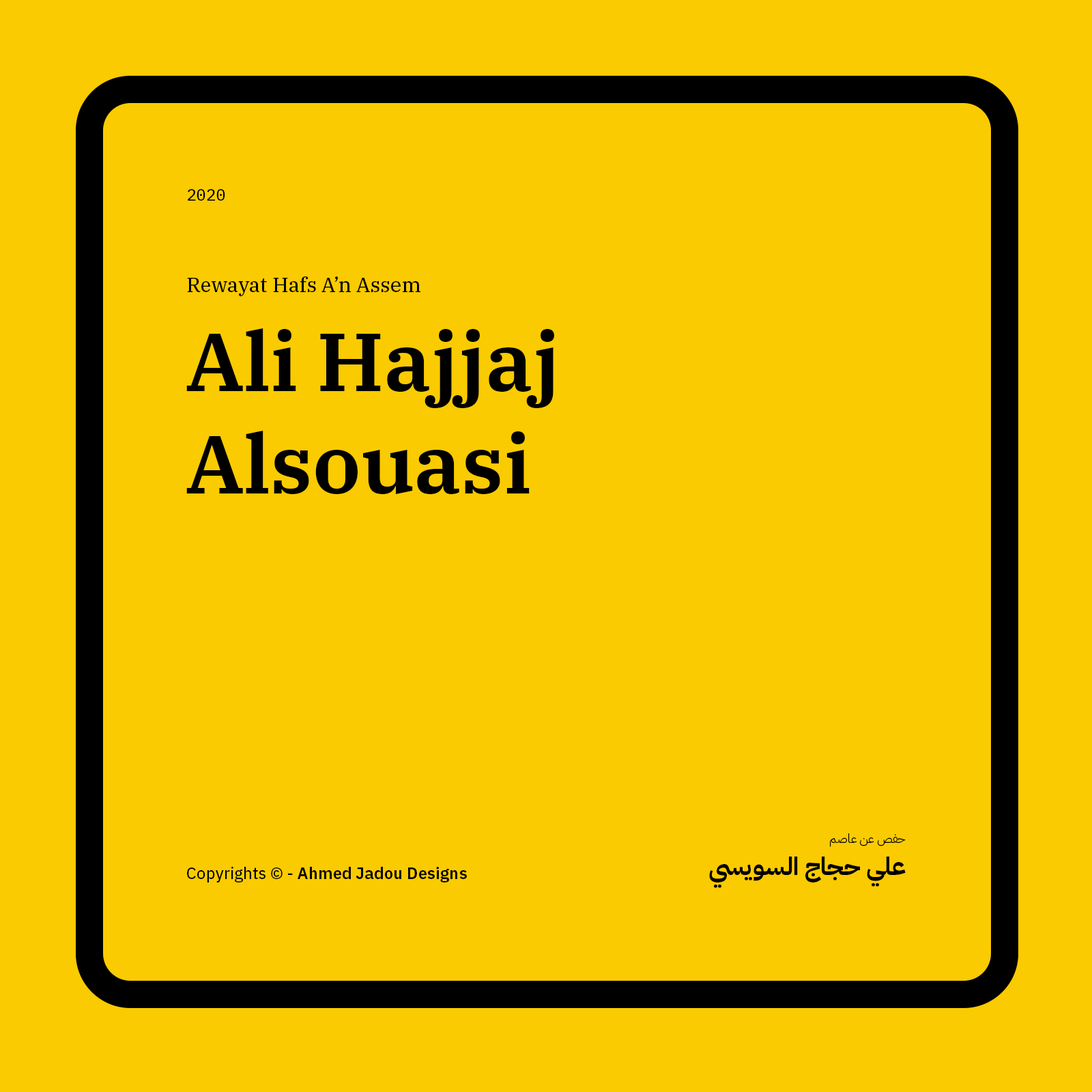
<style>
.page{position:relative;width:1092px;height:1092px;background:#facb00}
.page>*{position:absolute;margin:0}
.t1{font:16.4px "IBMPlexMono-Text";color:#000000}
.t2{font:20.5px "IBMPlexSerif-Text";color:#000000}
.t3{font:81.9px/102.7px "IBMPlexSerif-SemiBold";color:#000000}
.t4{font:12.3px "IBMPlexArabic-Light";color:#000000}
.t5{font:24.6px "IBMPlexArabic-Bold";color:#000000}
.t6{font:16.4px "IBMPlexSans-SemiBold";color:#000000}
.t7{font:16.4px "IBMPlexSans-Text";color:#000000}
</style>
<div class="page">
<p class="t1" style="left:188px;top:189px;width:37px;height:12px">2020</p>
<p class="t2" style="left:187px;top:276px;width:233px;height:20px">Rewayat Hafs A’n Assem</p>
<p class="t3" style="left:186px;top:328px;width:368px;height:166px">Ali Hajjaj Alsouasi</p>
<p class="t4" style="left:830px;top:833px;width:76px;height:14px">حفص عن عاصم</p>
<p class="t5" style="left:709px;top:857px;width:197px;height:31px">علي حجاج السويسي</p>
<p class="t6" style="left:187px;top:867px;width:280px;height:15px"><span class="t7">Copyrights © - </span>Ahmed Jadou Designs</p>
</div>
